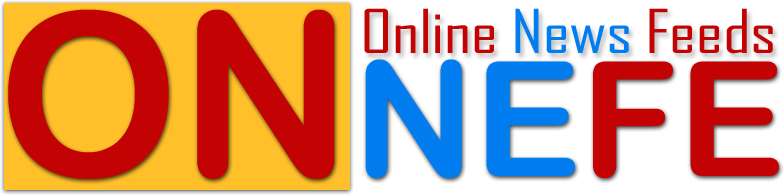
<style>
.page{position:relative;width:784px;height:195px;background:#c30303}
.page>*{position:absolute;margin:0}
.t1{font:228.6px "ArialRoundedMTBold";color:#c30303}
.t2{font:160.1px "ArialRoundedMTBold";color:#027df0}
.t3{font:160.1px "ArialRoundedMTBold";color:#c30303}
.t4{font:58px "AgencyFB-Reg";letter-spacing:-0.005em;color:#c30303;scale:1.25 1}
.t5{font:58px "AgencyFB-Reg";letter-spacing:-0.005em;color:#027df0;scale:1.25 1}
</style>
<div class="page">
<p class="t1" style="left:8px;top:9px;width:771px;height:170px">ON<span class="t2">NE</span><span class="t3">FE</span></p>
<p class="t4" style="left:364px;top:8px;width:409px;height:46px">Online <span class="t5">News </span>Feeds</p>
</div>
